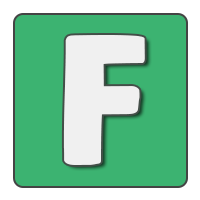
<style>
.page{position:relative;width:200px;height:200px;background:#3cb371}
.page>*{position:absolute;margin:0}
.t1{font:185.2px "SteamedDEMO-Regular";letter-spacing:0.005em;color:#f0f0f0;scale:1.25 1}
</style>
<div class="page">
<p class="t1" style="left:63px;top:35px;width:82px;height:130px">f</p>
</div>
